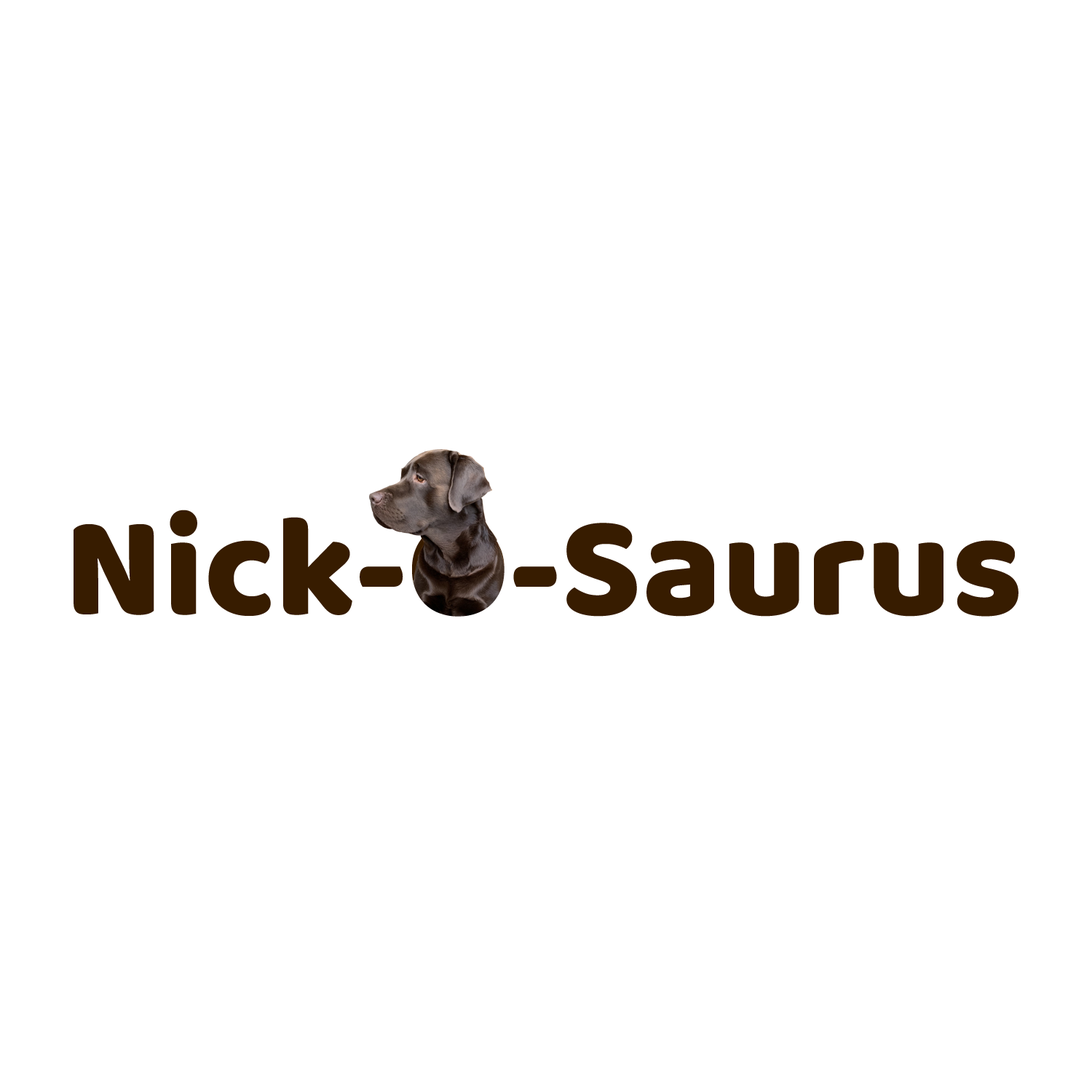
<style>
.page{position:relative;width:1092px;height:1092px;background:#ffffff}
.page>*{position:absolute;margin:0}
.t1{font:145.6px "BalooBhai-Regular";color:#371c00}
</style>
<div class="page">
<p class="t1" style="left:74px;top:510px;width:944px;height:107px">Nick-O-Saurus</p>
</div>
